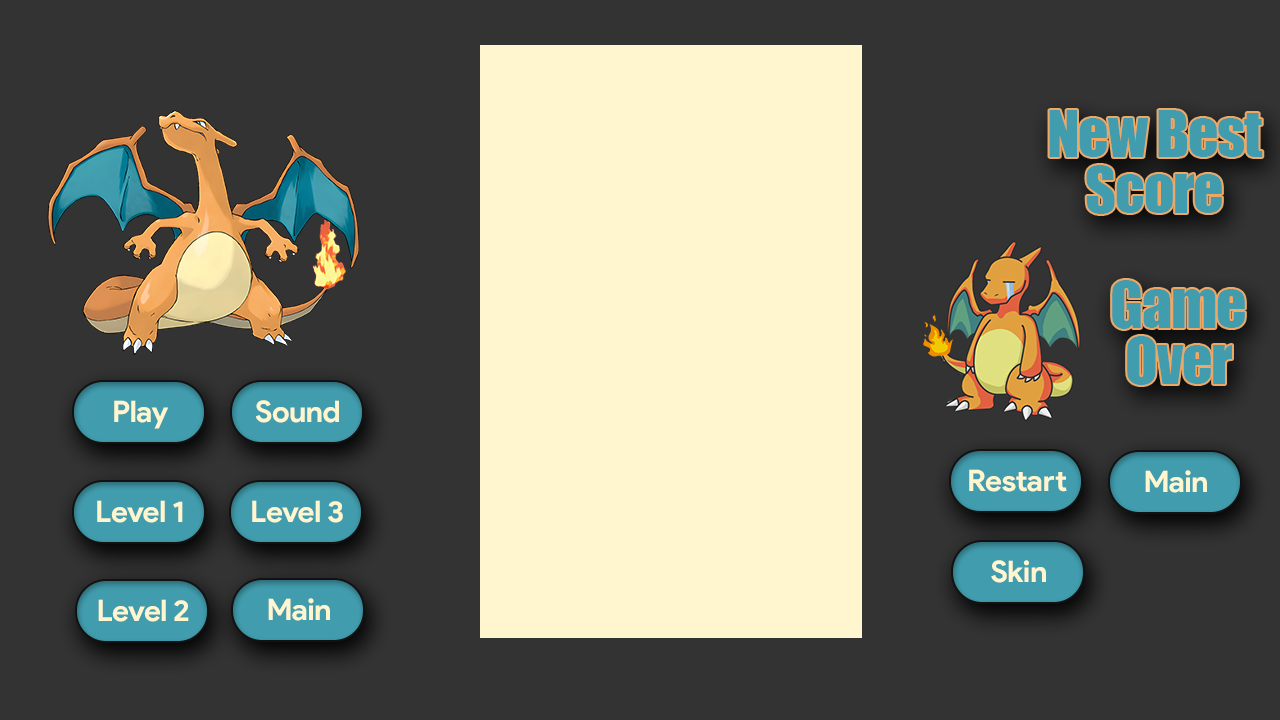
<style>
.page{position:relative;width:1280px;height:720px;background:#333333}
.page>*{position:absolute;margin:0}
.t1{font:60px/56px "Impact";letter-spacing:-0.02em;color:#419dae}
.t2{font:29.7px "ProductSans-Bold";letter-spacing:-0.02em;color:#fff5cf}
</style>
<div class="page">
<p class="t1" style="left:1049px;top:110px;width:214px;height:104px;text-align:center">New Best<br>Score</p>
<p class="t1" style="left:1112px;top:280px;width:133px;height:105px;text-align:center">Game<br>Over</p>
<p class="t2" style="left:114px;top:400px;width:55px;height:29px">Play</p>
<p class="t2" style="left:255px;top:400px;width:84px;height:23px">Sound</p>
<p class="t2" style="left:969px;top:469px;width:98px;height:23px">Restart</p>
<p class="t2" style="left:1145px;top:470px;width:62px;height:23px">Main</p>
<p class="t2" style="left:97px;top:500px;width:86px;height:23px">Level 1</p>
<p class="t2" style="left:252px;top:500px;width:91px;height:23px">Level 3</p>
<p class="t2" style="left:991px;top:560px;width:55px;height:23px">Skin</p>
<p class="t2" style="left:98px;top:599px;width:91px;height:23px">Level 2</p>
<p class="t2" style="left:268px;top:598px;width:62px;height:23px">Main</p>
</div>
